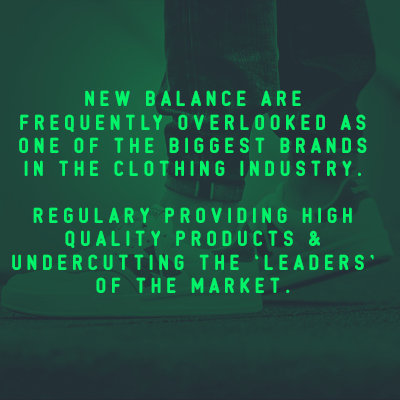
<style>
.page{position:relative;width:400px;height:400px}
.page>*{position:absolute;margin:0}
.t1{font:19.5px "232MKSDRoundBold";letter-spacing:0.2em;color:#02f369;text-transform:uppercase}
</style>
<div class="page">
<p class="t1" style="left:12px;top:90px;width:362px;height:203px;text-align:center">New balance are frequently overlooked as one of the biggest brands in the clothing industry.<br><br>regulary providing high quality products &amp; undercutting the ‘leaders’ of the market.</p>
</div>
